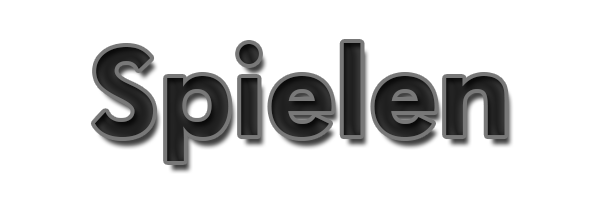
<style>
.page{position:relative;width:600px;height:200px;background:#ffffff}
.page>*{position:absolute;margin:0}
.t1{font:120px "FuturaBT-Heavy";color:#212121}
</style>
<div class="page">
<p class="t1" style="left:94px;top:43px;width:411px;height:118px">Spielen</p>
</div>
